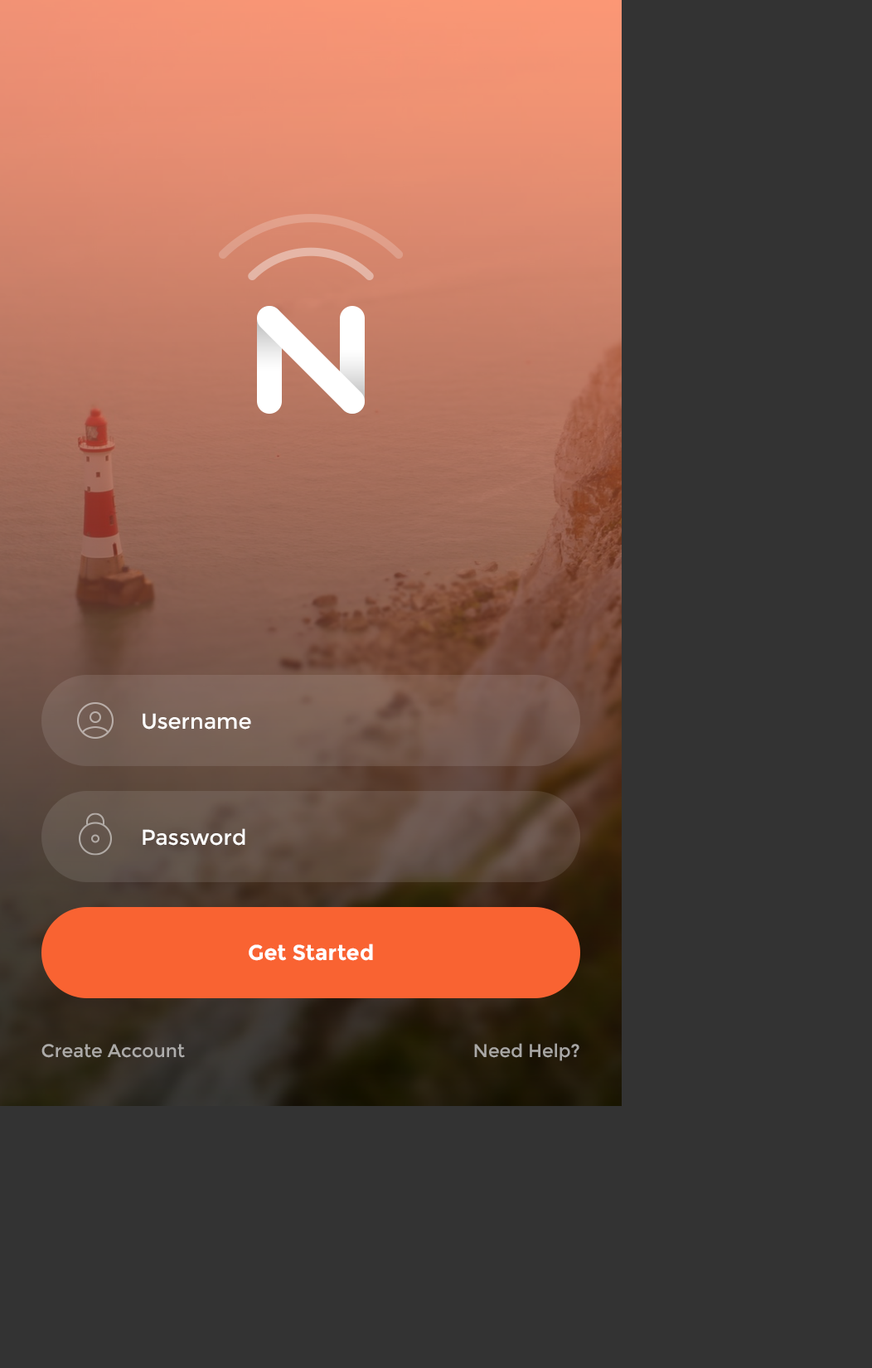
<style>
.page{position:relative;width:872px;height:1368px;background:#333333}
.page>*{position:absolute;margin:0}
.t1{font:21.5px "Montserrat-Regular";color:#ffffff}
.t2{font:21.5px "Montserrat-Bold";color:#ffffff}
.t3{font:18.2px "Montserrat-Regular";color:#adaba9}
.t4{font:18.2px "Montserrat-Regular";color:#a9a8a5}
</style>
<div class="page">
<p class="t1" style="left:143px;top:713px;width:108px;height:16px">Username</p>
<p class="t1" style="left:143px;top:828px;width:102px;height:17px">Password</p>
<p class="t2" style="left:249px;top:943px;width:124px;height:18px">Get Started</p>
<p class="t3" style="left:41px;top:1044px;width:144px;height:14px">Create Account</p>
<p class="t4" style="left:474px;top:1043px;width:105px;height:18px">Need Help?</p>
</div>
